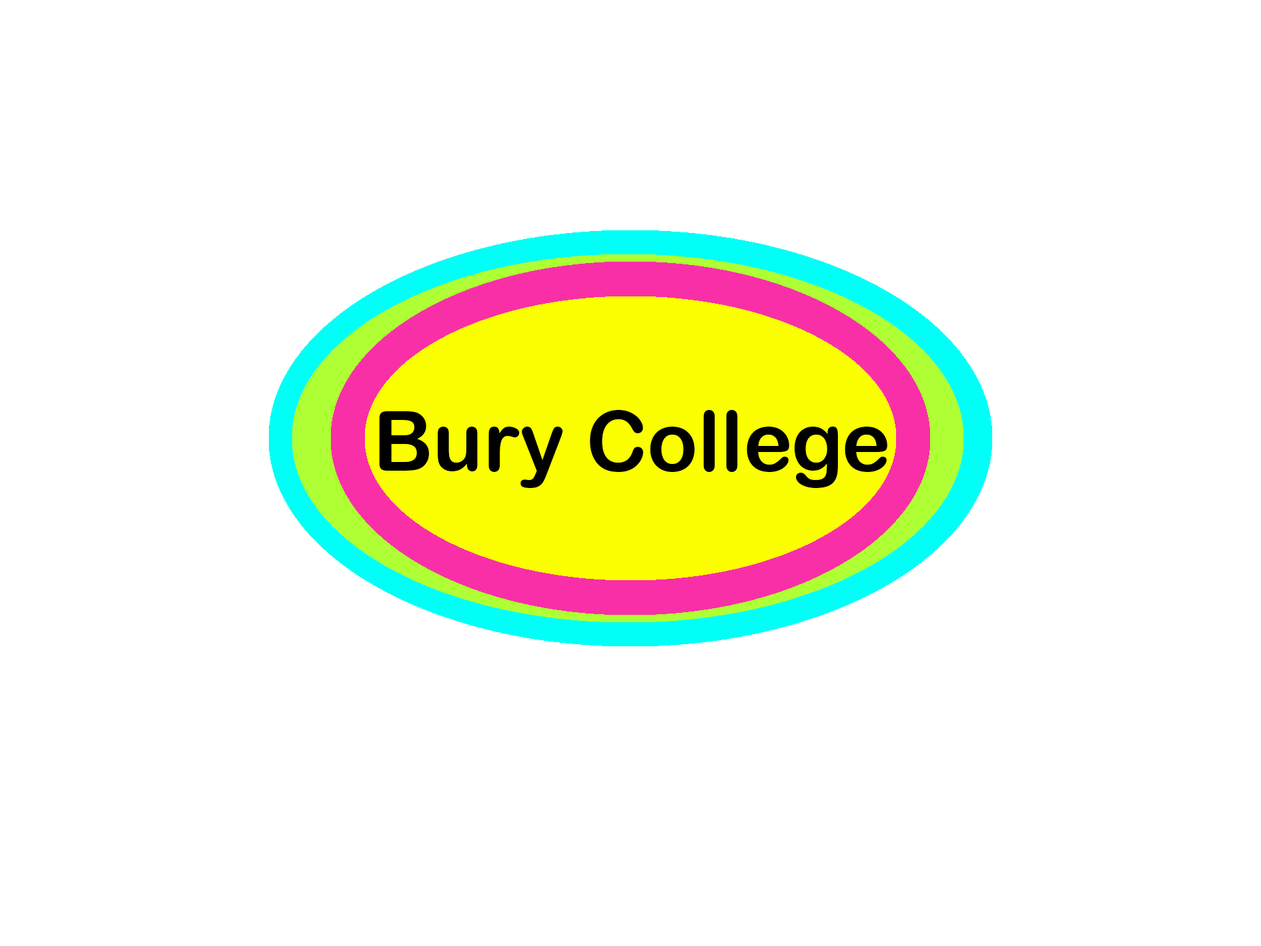
<style>
.page{position:relative;width:1261px;height:946px;background:#ffffff}
.page>*{position:absolute;margin:0}
.t1{font:83.4px "ArialRoundedMTBold";color:#000000}
</style>
<div class="page">
<p class="t1" style="left:379px;top:410px;width:508px;height:78px">Bury College</p>
</div>
